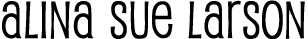
<style>
.page{position:relative;width:308px;height:39px;background:#ffffff}
.page>*{position:absolute;margin:0}
.t1{font:50.1px "Pupcat";color:#000000;font-weight:bold}
</style>
<div class="page">
<p class="t1" style="left:2px;top:0px;width:303px;height:39px">Alina Sue Larson</p>
</div>
